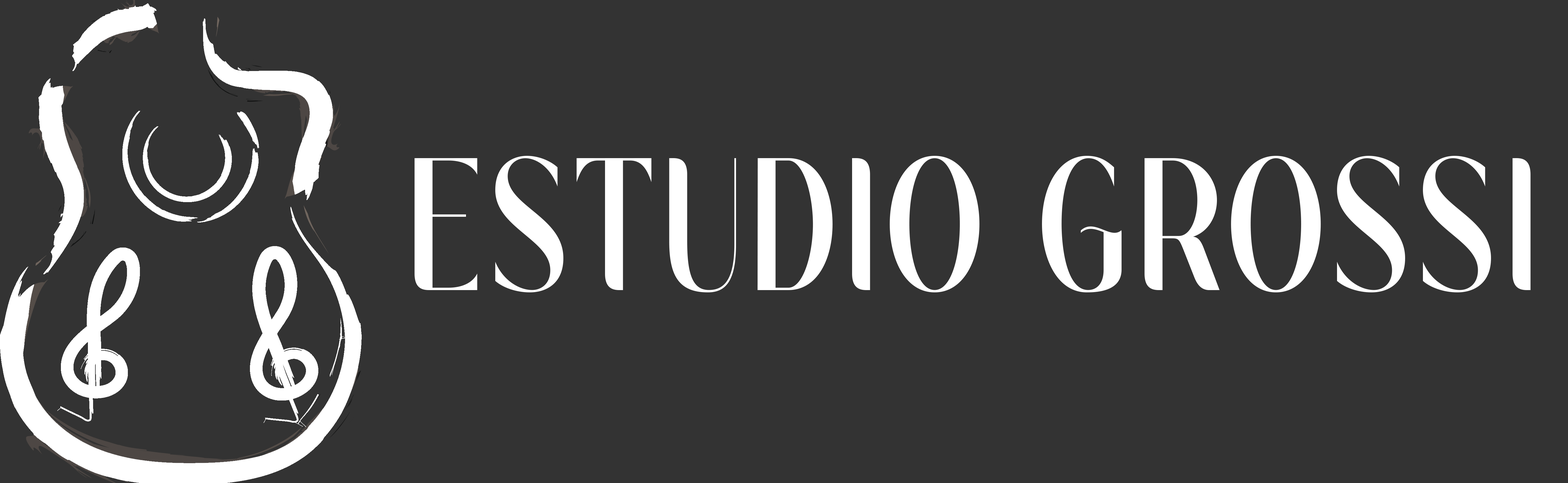
<style>
.page{position:relative;width:1568px;height:483px;background:#333333}
.page>*{position:absolute;margin:0}
.t1{font:239.4px "MoneaAlegante-Regular";letter-spacing:0.05em;color:#ffffff;scale:0.68 1}
</style>
<div class="page">
<p class="t1" style="left:415px;top:156px;width:1116px;height:136px">ESTUDIO GROSSI</p>
</div>
